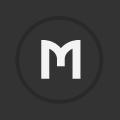
<style>
.page{position:relative;width:120px;height:120px;background:#333333}
.page>*{position:absolute;margin:0}
.t1{font:64px "SierraMadre-Bold";letter-spacing:0.025em;color:#ffffff}
</style>
<div class="page">
<p class="t1" style="left:41px;top:40px;width:40px;height:39px;opacity:0.94">m</p>
</div>
